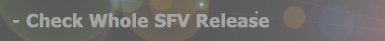
<style>
.page{position:relative;width:385px;height:41px}
.page>*{position:absolute;margin:0}
.t1{font:18px "Tahoma-Bold";color:#a4a4a4;font-weight:bold}
</style>
<div class="page">
<p class="t1" style="left:13px;top:13px;width:256px;height:15px">- Check Whole SFV Release</p>
</div>
